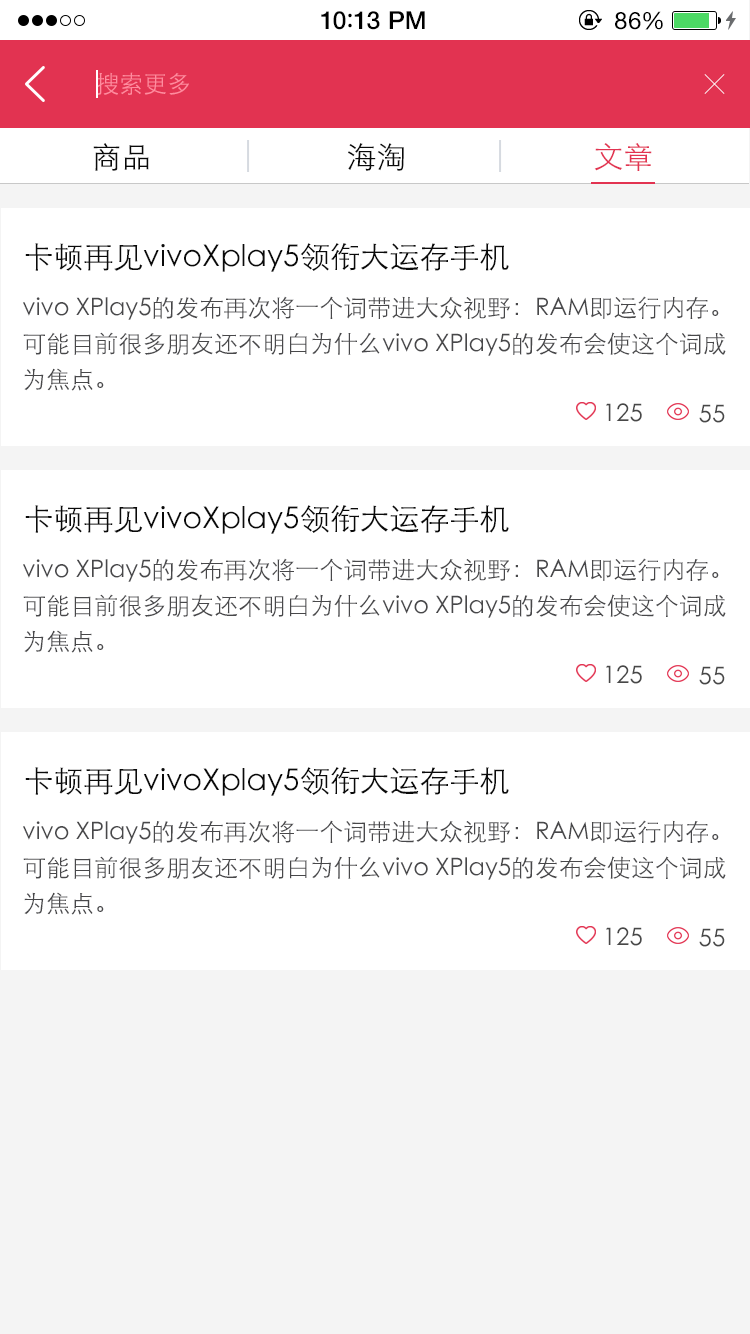
<style>
.page{position:relative;width:750px;height:1334px;background:#ffffff}
.page>*{position:absolute;margin:0}
.t1{font:25px "HelveticaNeue-Medium";letter-spacing:0.015em;color:#000000}
.t2{font:25px "ArialRoundedMTBold";letter-spacing:0.015em;color:#000000}
.t3{font:24px "HelveticaNeue";letter-spacing:0.03em;color:#000000}
.t4{font:24px "STXihei";color:#ff8c9f}
.t5{font:30px "STXihei";color:#0a0a0a}
.t6{font:30px "STXihei";color:#e23351}
.t7{font:24px/36.1px "STXihei";color:#48484a}
.t8{font:24px "STXihei";color:#484848}
</style>
<div class="page">
<p class="t1" style="left:321px;top:11px;width:104px;height:19px">10<span class="t2">:</span>13 PM</p>
<p class="t3" style="left:615px;top:11px;width:48px;height:19px">86%</p>
<p class="t4" style="left:96px;top:72px;width:93px;height:23px">搜索更多</p>
<p class="t5" style="left:93px;top:143px;width:56px;height:28px">商品</p>
<p class="t5" style="left:348px;top:143px;width:56px;height:28px">海淘</p>
<p class="t6" style="left:594px;top:143px;width:58px;height:28px">文章</p>
<p class="t5" style="left:25px;top:243px;width:484px;height:29px">卡顿再见vivoXplay5领衔大运存手机</p>
<p class="t7" style="left:23px;top:296px;width:703px;height:95px">vivo XPlay5的发布再次将一个词带进大众视野：RAM即运行内存。<br>可能目前很多朋友还不明白为什么vivo XPlay5的发布会使这个词成<br>为焦点。</p>
<p class="t8" style="left:606px;top:403px;width:36px;height:19px">125</p>
<p class="t8" style="left:699px;top:404px;width:26px;height:19px">55</p>
<p class="t5" style="left:25px;top:505px;width:484px;height:29px">卡顿再见vivoXplay5领衔大运存手机</p>
<p class="t7" style="left:23px;top:558px;width:703px;height:95px">vivo XPlay5的发布再次将一个词带进大众视野：RAM即运行内存。<br>可能目前很多朋友还不明白为什么vivo XPlay5的发布会使这个词成<br>为焦点。</p>
<p class="t8" style="left:606px;top:665px;width:36px;height:19px">125</p>
<p class="t8" style="left:699px;top:666px;width:26px;height:19px">55</p>
<p class="t5" style="left:25px;top:767px;width:484px;height:29px">卡顿再见vivoXplay5领衔大运存手机</p>
<p class="t7" style="left:23px;top:820px;width:703px;height:95px">vivo XPlay5的发布再次将一个词带进大众视野：RAM即运行内存。<br>可能目前很多朋友还不明白为什么vivo XPlay5的发布会使这个词成<br>为焦点。</p>
<p class="t8" style="left:606px;top:927px;width:36px;height:19px">125</p>
<p class="t8" style="left:699px;top:928px;width:26px;height:19px">55</p>
</div>
